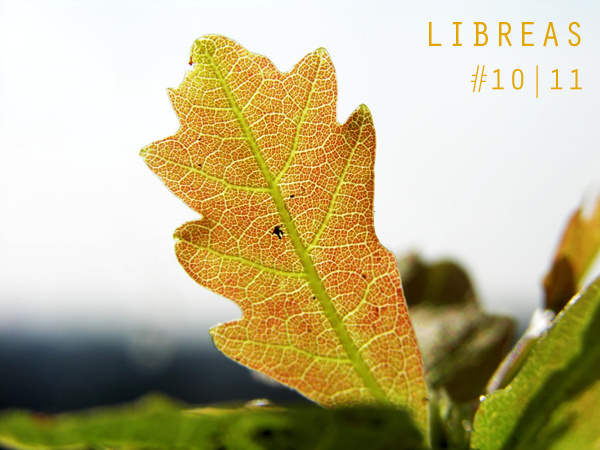
<style>
.page{position:relative;width:600px;height:450px}
.page>*{position:absolute;margin:0}
.t1{font:36px "OratorStd";letter-spacing:0.05em;color:#e3a601}
.t2{font:30px "OratorStd";letter-spacing:0.05em;color:#e3a601}
</style>
<div class="page">
<p class="t1" style="left:429px;top:21px;width:153px;height:77px">LIBREAS<br>  <span class="t2">#10|11</span></p>
</div>
